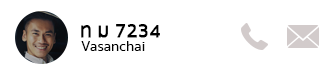
<style>
.page{position:relative;width:335px;height:74px;background:#ffffff}
.page>*{position:absolute;margin:0}
.t1{font:17.1px "SukhumvitSet-Medium";color:#000000;font-weight:bold}
.t2{font:13px "SukhumvitSet-Medium";color:#000000}
</style>
<div class="page">
<p class="t1" style="left:81px;top:24px;width:79px;height:14px">ท ม 7234</p>
<p class="t2" style="left:81px;top:41px;width:64px;height:10px">Vasanchai</p>
</div>
